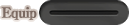
<style>
.page{position:relative;width:129px;height:25px}
.page>*{position:absolute;margin:0}
.t1{font:14px "RyuminPro-ExBold";letter-spacing:-0.08em;color:#7b6961;font-weight:bold}
</style>
<div class="page">
<p class="t1" style="left:1px;top:7px;width:36px;height:13px">Equip</p>
</div>
